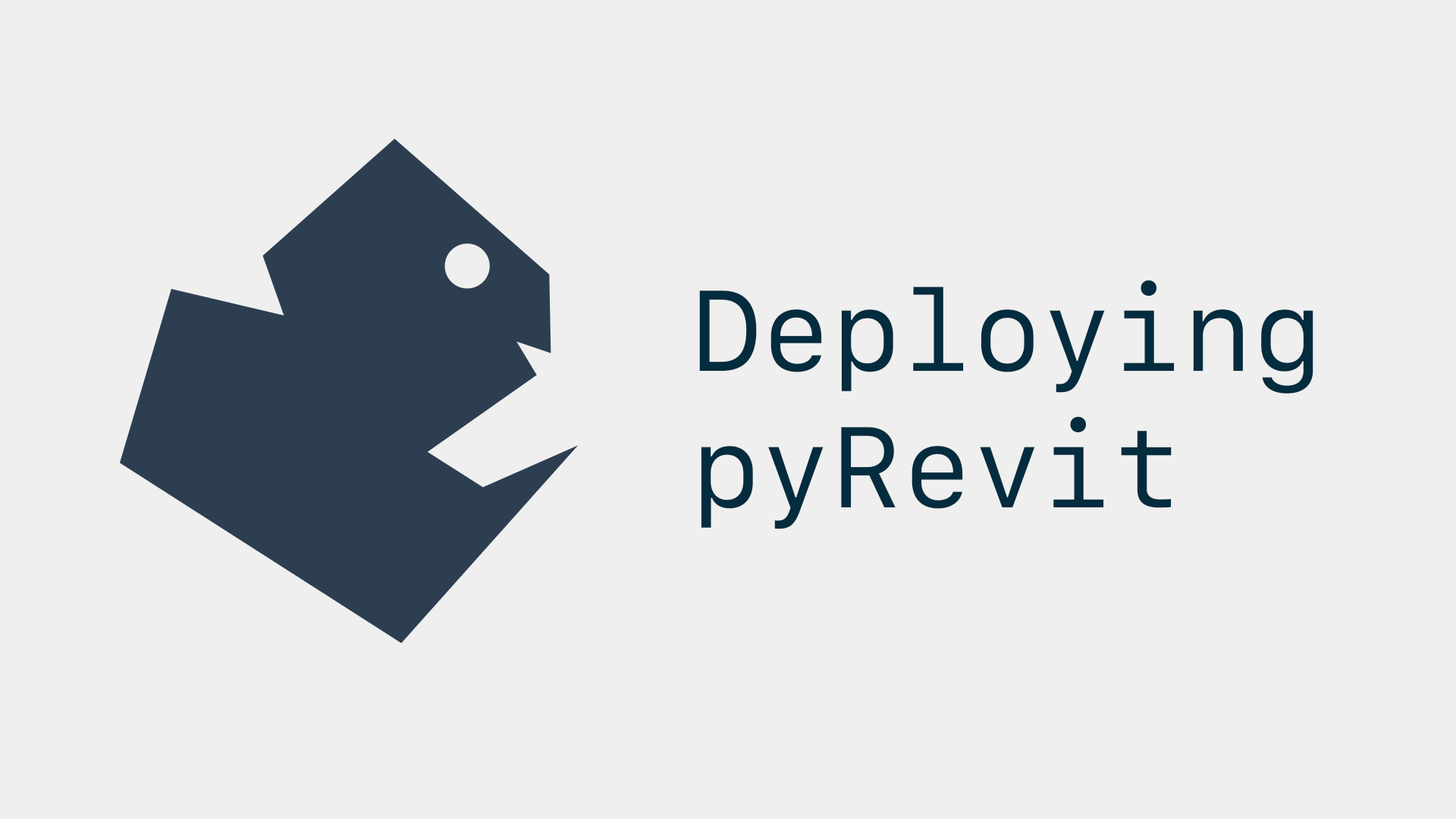
<style>
.page{position:relative;width:1456px;height:819px;background:#efefef}
.page>*{position:absolute;margin:0}
.t1{font:113.7px "SFMono-Regular";color:#032c3e}
</style>
<div class="page">
<p class="t1" style="left:699px;top:280px;width:614px;height:249px">Deploying<br>pyRevit</p>
</div>
